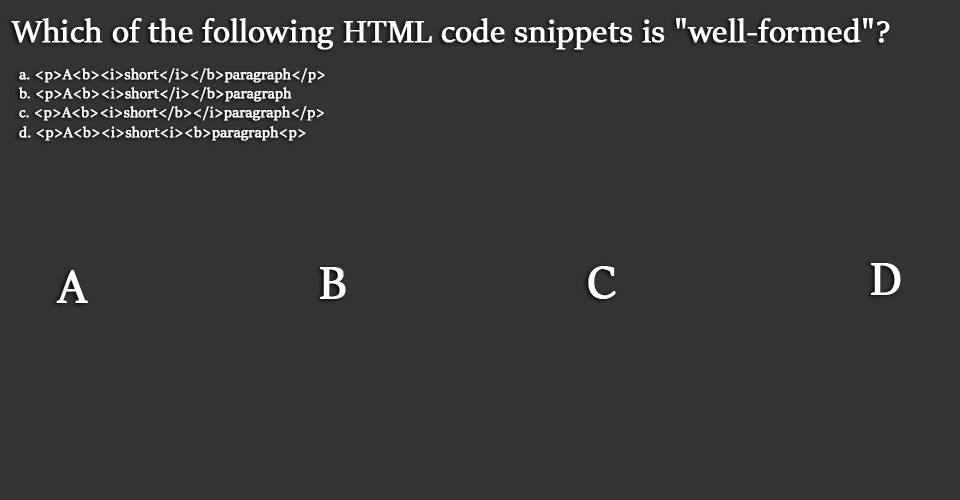
<style>
.page{position:relative;width:960px;height:500px;background:#333333}
.page>*{position:absolute;margin:0}
.t1{font:35px "SitkaBanner";color:#fffffe;font-weight:bold}
.t2{font:16px "SitkaBanner";color:#ffffff;font-weight:bold}
.t3{font:50px "SitkaBanner";color:#ffffff;font-weight:bold}
</style>
<div class="page">
<p class="t1" style="left:11px;top:18px;width:879px;height:32px">Which of the following HTML code snippets is "well-formed"?</p>
<p class="t2" style="left:19px;top:68px;width:306px;height:73px">a. &lt;p&gt;A&lt;b&gt;&lt;i&gt;short&lt;/i&gt;&lt;/b&gt;paragraph&lt;/p&gt;<br> b. &lt;p&gt;A&lt;b&gt;&lt;i&gt;short&lt;/i&gt;&lt;/b&gt;paragraph<br> c. &lt;p&gt;A&lt;b&gt;&lt;i&gt;short&lt;/b&gt;&lt;/i&gt;paragraph&lt;/p&gt;<br> d. &lt;p&gt;A&lt;b&gt;&lt;i&gt;short&lt;i&gt;&lt;b&gt;paragraph&lt;p&gt;</p>
<p class="t3" style="left:56px;top:270px;width:32px;height:33px">A</p>
<p class="t3" style="left:320px;top:267px;width:26px;height:32px">B</p>
<p class="t3" style="left:588px;top:266px;width:28px;height:33px">C</p>
<p class="t3" style="left:871px;top:263px;width:30px;height:32px">D</p>
</div>
